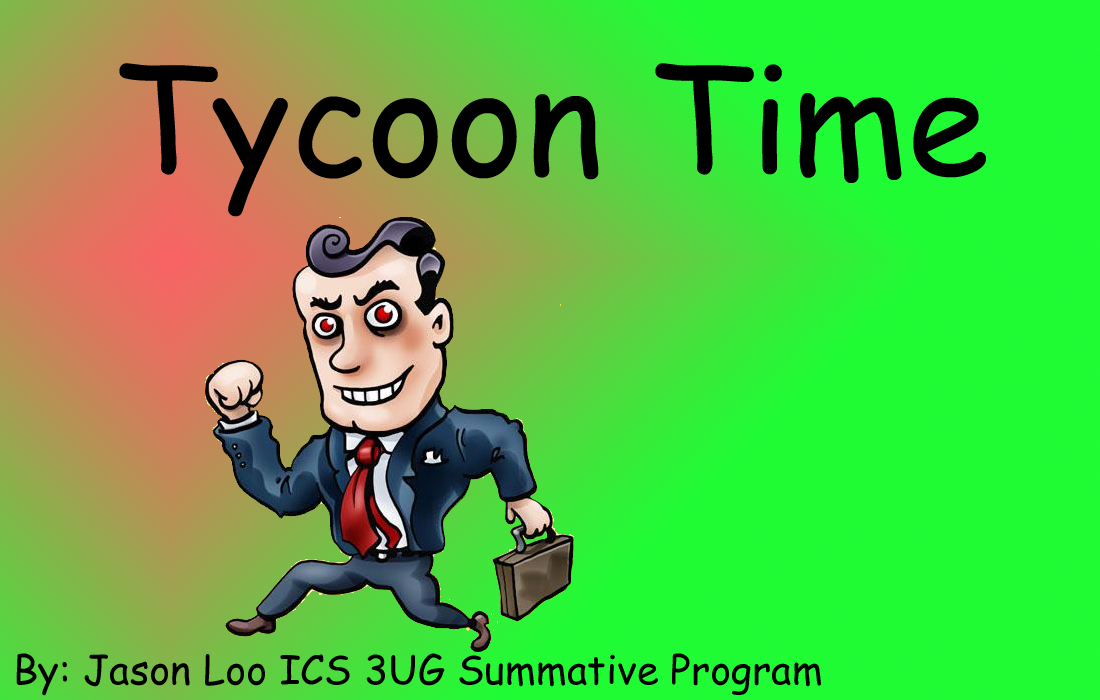
<style>
.page{position:relative;width:1100px;height:700px}
.page>*{position:absolute;margin:0}
.t1{font:149.4px "ComicSansMS";color:#000000}
.t2{font:39.9px "ComicSansMS";color:#000000}
</style>
<div class="page">
<p class="t1" style="left:119px;top:63px;width:867px;height:154px">Tycoon Time</p>
<p class="t2" style="left:16px;top:653px;width:805px;height:43px">By: Jason Loo ICS 3UG Summative Program</p>
</div>
